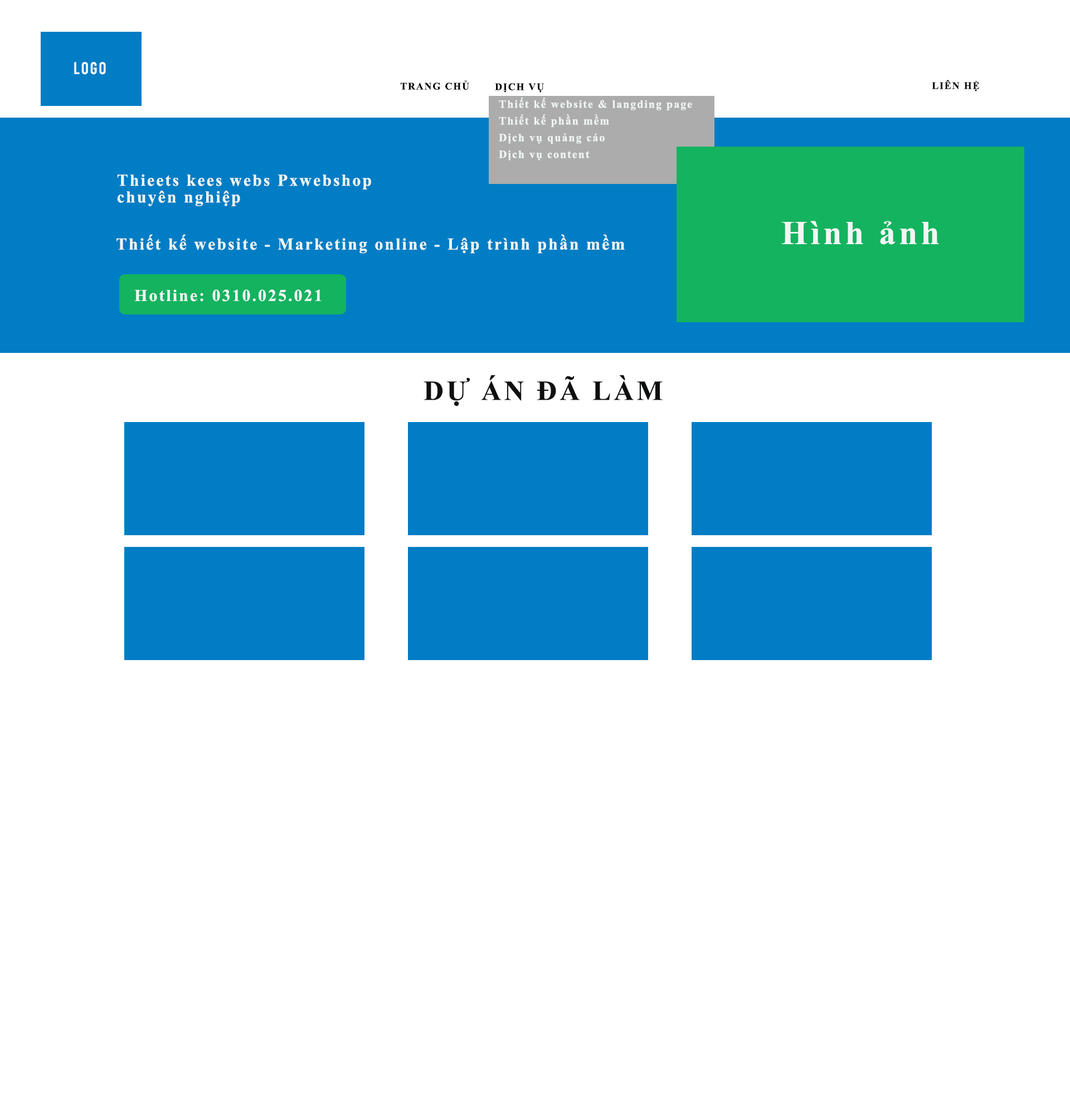
<style>
.page{position:relative;width:1070px;height:1115px;background:#ffffff}
.page>*{position:absolute;margin:0}
.t1{font:16.7px "Bahnschrift-SemiBoldCondensed";letter-spacing:0.1em;color:#f7faf8}
.t2{font:10px "TimesNewRomanPS-BoldMT";letter-spacing:0.1em;color:#050505}
.t3{font:11.1px/16.7px "TimesNewRomanPS-BoldMT";letter-spacing:0.1em;color:#f1f7f4}
.t4{font:16.7px/16.7px "TimesNewRomanPS-BoldMT";letter-spacing:0.1em;color:#f1f7f4}
.t5{font:33.4px "TimesNewRomanPS-BoldMT";letter-spacing:0.1em;color:#f1f7f4}
.t6{font:16.7px "TimesNewRomanPS-BoldMT";letter-spacing:0.1em;color:#f1f7f4}
.t7{font:27.9px "TimesNewRomanPS-BoldMT";letter-spacing:0.1em;color:#0e0f0f}
</style>
<div class="page">
<p class="t1" style="left:74px;top:62px;width:32px;height:13px">LOGO</p>
<p class="t2" style="left:400px;top:80px;width:69px;height:10px">TRANG CHỦ</p>
<p class="t2" style="left:495px;top:83px;width:49px;height:10px">DỊCH VỤ</p>
<p class="t2" style="left:932px;top:80px;width:47px;height:11px">LIÊN HỆ</p>
<p class="t3" style="left:499px;top:98px;width:193px;height:62px">Thiết kế website &amp; langding page<br>Thiết kế phần mềm<br>Dịch vụ quảng cáo<br>Dịch vụ content</p>
<p class="t4" style="left:117px;top:174px;width:254px;height:32px">Thieets kees webs Pxwebshop<br>chuyên nghiệp</p>
<p class="t5" style="left:782px;top:221px;width:157px;height:24px">Hình ảnh</p>
<p class="t6" style="left:116px;top:234px;width:509px;height:20px">Thiết kế website - Marketing online - Lập trình phần mềm</p>
<p class="t6" style="left:134px;top:289px;width:188px;height:12px">Hotline: 0310.025.021</p>
<p class="t7" style="left:424px;top:375px;width:239px;height:31px">DỰ ÁN ĐÃ LÀM</p>
</div>
